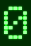
<style>
.page{position:relative;width:31px;height:46px;background:#002d02}
.page>*{position:absolute;margin:0}
.t1{font:48px "EnhancedDotDigital-7";color:#a4ffa4;font-weight:bold}
</style>
<div class="page">
<p class="t1" style="left:4px;top:6px;width:23px;height:33px">0</p>
</div>
